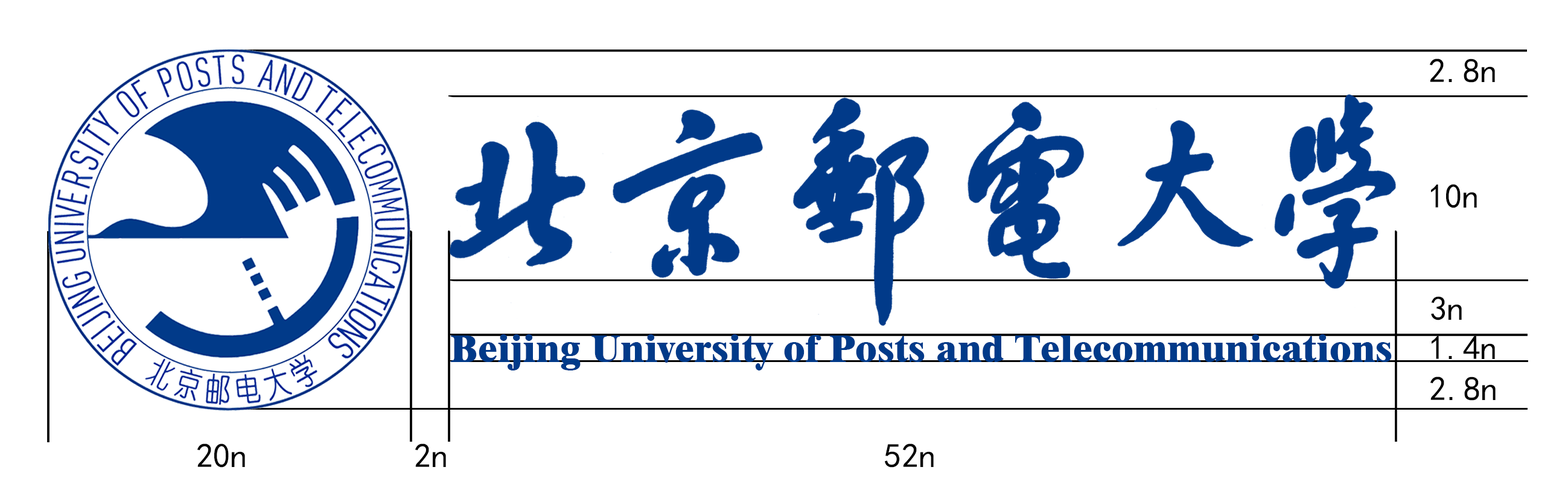
<style>
.page{position:relative;width:1568px;height:499px;background:#ffffff}
.page>*{position:absolute;margin:0}
.t1{font:34.2px "SimHei";color:#000000}
.t2{font:39.4px "Dutch801BT-ExtraBold";color:#013a89}
</style>
<div class="page">
<p class="t1" style="left:1429px;top:59px;width:66px;height:24px">2.8n</p>
<p class="t1" style="left:1431px;top:184px;width:46px;height:24px">10n</p>
<p class="t1" style="left:1431px;top:296px;width:31px;height:24px">3n</p>
<p class="t2" style="left:451px;top:334px;width:941px;height:37px">Beijing University of Posts and Telecommunications</p>
<p class="t1" style="left:1432px;top:336px;width:63px;height:23px">1.4n</p>
<p class="t1" style="left:1430px;top:377px;width:66px;height:24px">2.8n</p>
<p class="t1" style="left:197px;top:444px;width:48px;height:24px">20n</p>
<p class="t1" style="left:415px;top:444px;width:31px;height:23px">2n</p>
<p class="t1" style="left:885px;top:444px;width:49px;height:24px">52n</p>
</div>
